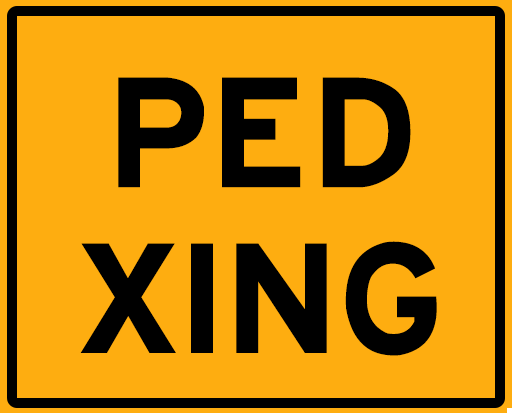
<style>
.page{position:relative;width:512px;height:413px;background:#fead10}
.page>*{position:absolute;margin:0}
.t1{font:165.8px/165.8px "HittheRoad";color:#000000}
</style>
<div class="page">
<p class="t1" style="left:80px;top:77px;width:357px;height:279px;text-align:center">PED<br>XING</p>
</div>
